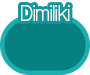
<style>
.page{position:relative;width:90px;height:75px;background:#078081}
.page>*{position:absolute;margin:0}
.t1{font:20px "GothicMB101Pro-Light";letter-spacing:-0.08em;color:#fff6f3;scale:0.9 1}
</style>
<div class="page">
<p class="t1" style="left:21px;top:5px;width:49px;height:16px">Dimiliki</p>
</div>
